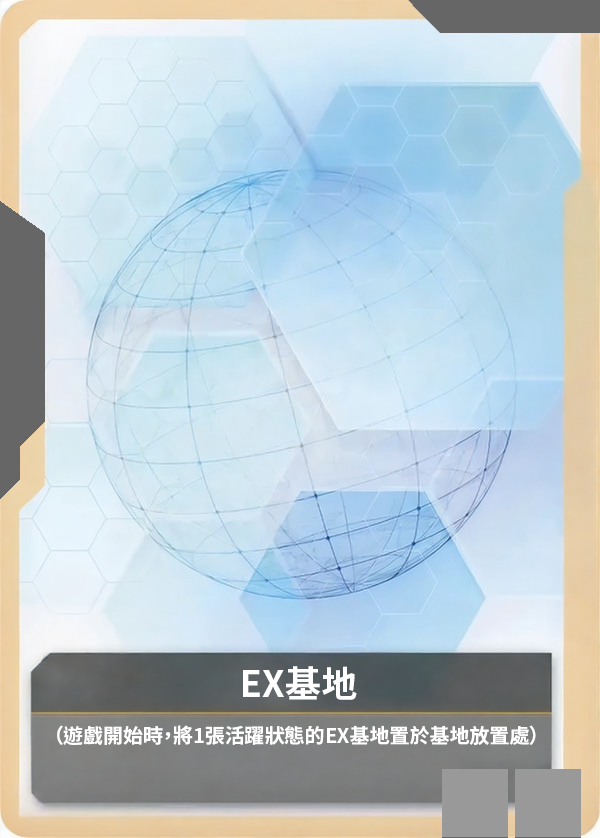
<style>
.page{position:relative;width:600px;height:838px}
.page>*{position:absolute;margin:0}
.t1{font:36px "NotoSansCJKtc-Bold";color:#ffffff}
.t2{font:20px "NotoSansCJKtc-Bold";color:#ffffff}
</style>
<div class="page">
<p class="t1" style="left:243px;top:666px;width:114px;height:34px">EX基地</p>
<p class="t2" style="left:57px;top:725px;width:479px;height:21px">（遊戲開始時，將1張活躍狀態的EX基地置於基地放置處）</p>
</div>
